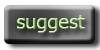
<style>
.page{position:relative;width:100px;height:50px}
.page>*{position:absolute;margin:0}
.t1{font:20px "Tahoma"}
</style>
<div class="page">
<p class="t1" style="left:17px;top:15px;width:68px;height:18px">suggest</p>
</div>
